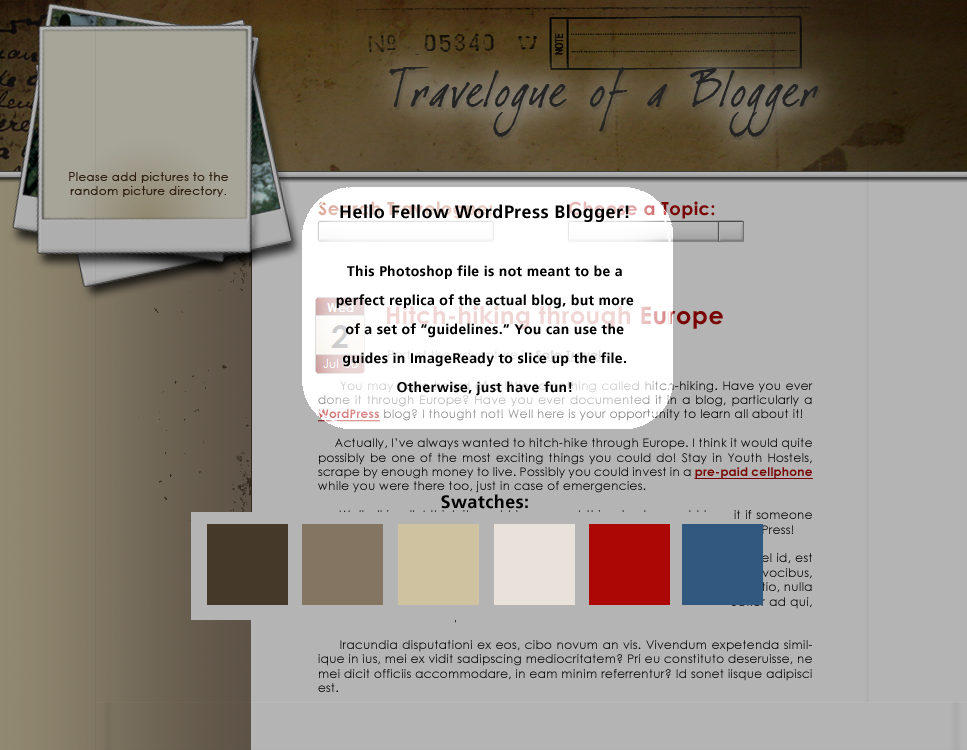
<style>
.page{position:relative;width:967px;height:750px;background:#b4b4b4}
.page>*{position:absolute;margin:0}
.t1{font:85px "DearJoeItalic";letter-spacing:0.025em;color:#333333}
.t2{font:12px "CenturyGothic";letter-spacing:0.025em;color:#412c16}
.t3{font:18px "CenturyGothic-Bold";letter-spacing:0.025em}
.t4{font:12px "CenturyGothic";letter-spacing:0.025em}
.t5{font:12px "CenturyGothic-Bold";letter-spacing:0.025em;text-decoration:underline}
</style>
<div class="page">
<p class="t1" style="left:389px;top:67px;width:430px;height:70px">Travelogue of a Blogger</p>
<p class="t2" style="left:69px;top:172px;width:160px;height:25px;text-align:center">Please add pictures to the random picture directory.</p>
<p class="t3" style="left:569px;top:201px;width:146px;height:18px">Choose a Topic:</p>
<p class="t4" style="left:318px;top:381px;width:495px;height:311px;text-align:justify">You may have heard of a little something called hitch-hiking. Have you ever done it through Europe? Have you ever documented it in a blog, particularly a <span class="t5">WordPress</span> blog? I thought not! Well here is your opportunity to learn all about it!<br><br>     Actually, I’ve always wanted to hitch-hike through Europe. I think it would quite possibly be one of the most exciting things you could do! Stay in Youth Hostels, scrape by enough money to live. Possibly you could invest in a <span class="t5">pre-paid cellphone</span> while you were there too, just in case of emergencies.<br><br>     Well all in all, I think it would be a great thing to do, would love it if someone would fund this for me, and it would be even better to write it up in WordPress!<br><br>     Lorem ipsum aperiri eruditi argumentum no mei? Vero nihil tempor mel id, est ea porro intellegat. In ius postea definitionem, id vel munere tamquam vocibus, omnium elaboraret sit ei? Puto cibo partiendo has id, id nec ridens quaestio, nulla inermis laboramus sed ad. Et volumus adolescens sit, accusam instructior ad qui, molestiae deterruisset pri ex.<br><br>     Iracundia disputationi ex eos, cibo novum an vis. Vivendum expetenda similique in ius, mei ex vidit sadipscing mediocritatem? Pri eu constituto deseruisse, ne mei dicit officiis accommodare, in eam minim referrentur? Id sonet iisque adipisci est.</p>
</div>
